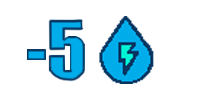
<style>
.page{position:relative;width:200px;height:100px;background:#ffffff}
.page>*{position:absolute;margin:0}
.t1{font:72px "Impact";color:#00acea}
</style>
<div class="page">
<p class="t1" style="left:27px;top:21px;width:58px;height:58px">-5</p>
</div>
